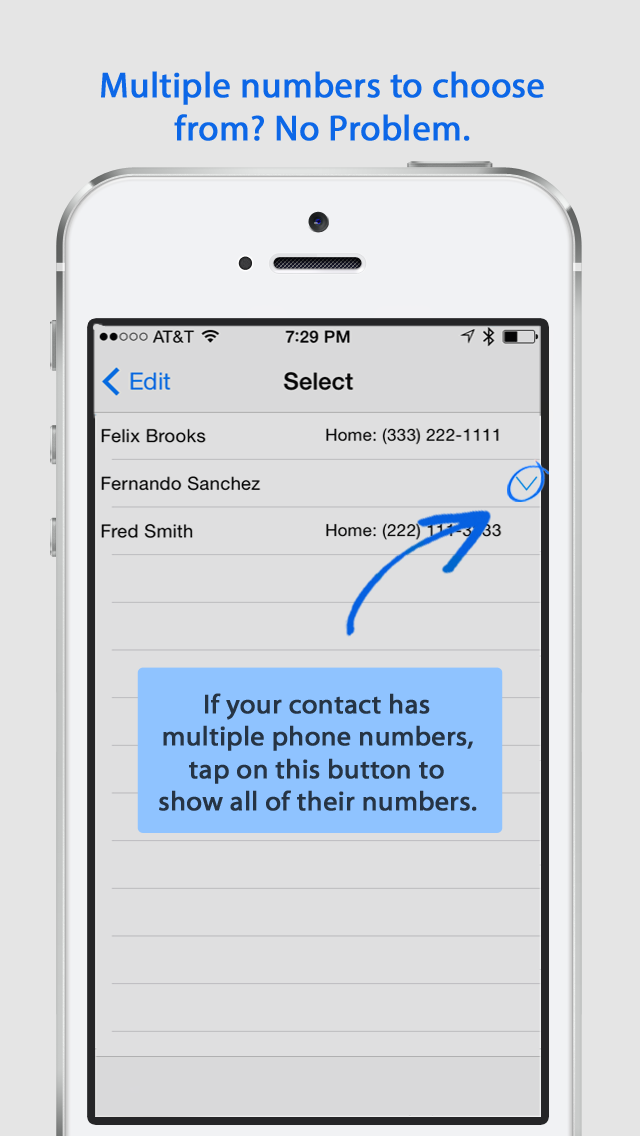
<style>
.page{position:relative;width:640px;height:1136px;background:#dfdfe0}
.page>*{position:absolute;margin:0}
.t1{font:36px "MyriadPro-Regular";color:#0c67e7;font-weight:bold}
.t2{font:27px "Myriad-Web";color:#263444;font-weight:bold}
</style>
<div class="page">
<p class="t1" style="left:101px;top:71px;width:443px;height:70px;text-align:center">Multiple numbers to choose from? No Problem.</p>
<p class="t2" style="left:159px;top:693px;width:318px;height:118px;text-align:center">If your contact has multiple phone numbers, tap on this button to show all of their numbers.</p>
</div>
